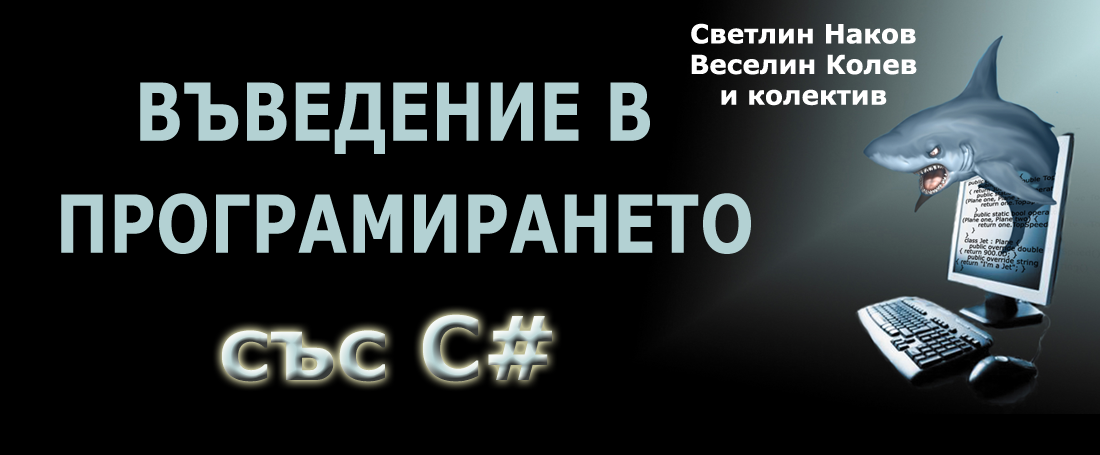
<style>
.page{position:relative;width:1100px;height:455px;background:#000000}
.page>*{position:absolute;margin:0}
.t1{font:26.2px/30.7px "Verdana-Bold";color:#ffffff}
.t2{font:80px/12.4px "Verdana-Bold";color:#b3d1d3;scale:0.8 1}
.t3{font:87.7px "Verdana-Bold"}
</style>
<div class="page">
<p class="t1" style="left:691px;top:23px;width:226px;height:83px;text-align:center">Светлин Наков<br>Веселин Колев<br>и колектив</p>
<p class="t2" style="left:61px;top:82px;width:690px;height:172px;text-align:center">ВЪВЕДЕНИЕ В <br><br><br><br><br><br><br><br><br>ПРОГРАМИРАНЕТО</p>
<p class="t3" style="left:222px;top:314px;width:330px;height:68px">със С#</p>
</div>
